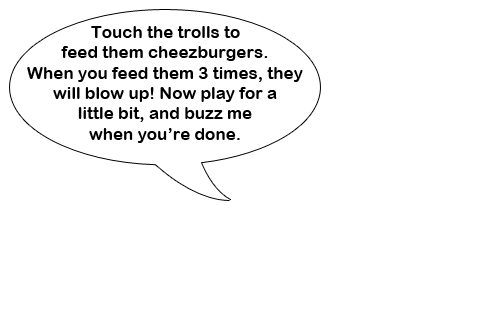
<style>
.page{position:relative;width:480px;height:320px;background:#ffffff}
.page>*{position:absolute;margin:0}
.t1{font:17px "ArialRoundedMTBold";color:#000000}
</style>
<div class="page">
<p class="t1" style="left:27px;top:26px;width:276px;height:117px;text-align:center">Touch the trolls to<br>feed them cheezburgers.<br>When you feed them 3 times, they<br>will blow up! Now play for a<br>little bit, and buzz me<br>when you’re done.</p>
</div>
